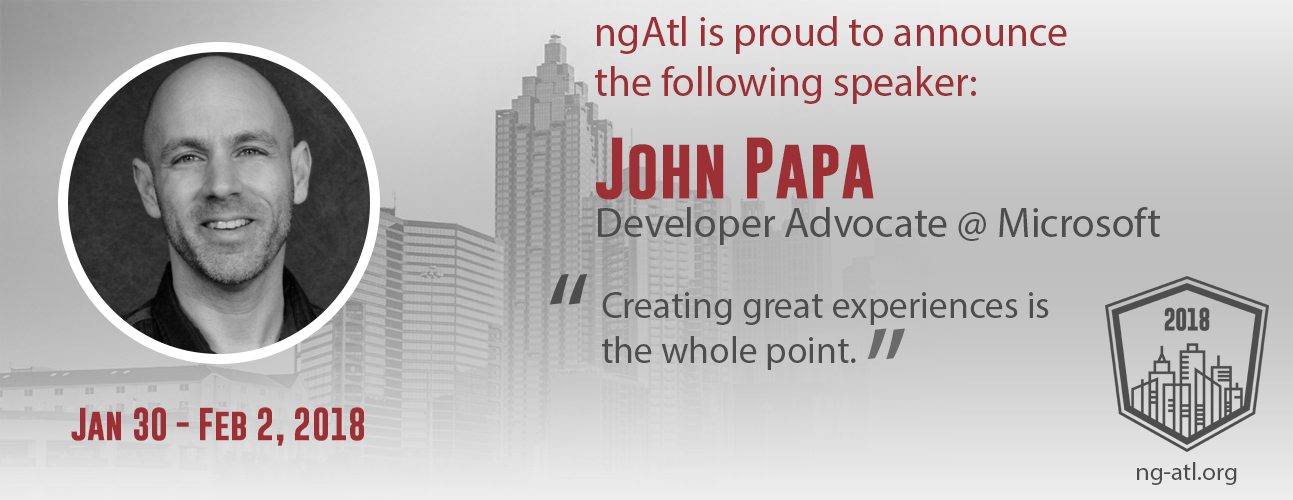
<style>
.page{position:relative;width:1293px;height:500px}
.page>*{position:absolute;margin:0}
.t1{font:41.7px "MyriadPro-Regular";color:#9d3035}
.t2{font:62.5px "GoboldBold";color:#9d3035}
.t3{font:41.7px "MyriadPro-Regular";color:#4d4d4e}
.t4{font:125px "MyriadPro-Regular";color:#4d4d4e}
.t5{font:37.5px "MyriadPro-Regular";color:#4d4d4e}
.t6{font:125px "MyriadPro-Regular";color:#6a6a6b}
.t7{font:33.3px "GoboldBold";color:#9d3035}
.t8{font:25px "MyriadPro-Regular";color:#4d4d4e}
</style>
<div class="page">
<p class="t1" style="left:595px;top:16px;width:472px;height:88px">ngAtl is proud to announce the following speaker:</p>
<p class="t2" style="left:596px;top:137px;width:278px;height:63px">John Papa</p>
<p class="t3" style="left:598px;top:207px;width:562px;height:38px">Developer Advocate @ Microsoft</p>
<p class="t4" style="left:550px;top:273px;width:38px;height:32px">“</p>
<p class="t5" style="left:602px;top:292px;width:447px;height:78px">Creating great experiences is the whole point.</p>
<p class="t6" style="left:867px;top:328px;width:38px;height:32px;rotate:180deg">“</p>
<p class="t7" style="left:71px;top:407px;width:293px;height:39px">Jan 30 - Feb 2, 2018</p>
<p class="t8" style="left:1137px;top:462px;width:100px;height:23px">ng-atl.org</p>
</div>
